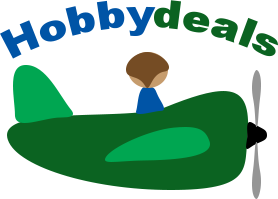
<style>
.page{position:relative;width:278px;height:199px;background:#ffffff}
.page>*{position:absolute;margin:0}
.t1{font:37.5px "Arial-Black";color:#0054a6}
.t2{font:37.5px "Arial-Black";color:#0b6321}
</style>
<div class="page">
<p class="t1" style="left:0px;top:0px;width:278px;height:59px">Hobby<span class="t2">deals</span></p>
</div>
